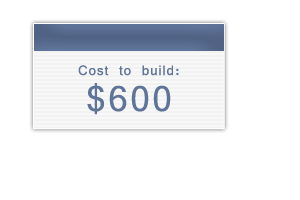
<style>
.page{position:relative;width:300px;height:200px;background:#ffffff}
.page>*{position:absolute;margin:0}
.t1{font:20px "Vrinda";letter-spacing:0.05em;color:#5f7499}
.t2{font:55px/36px "Kartika";letter-spacing:0.05em;color:#5f7499}
</style>
<div class="page">
<p class="t1" style="left:78px;top:65px;width:101px;height:50px;text-align:center">Cost to build:<br><span class="t2">$600</span></p>
</div>
